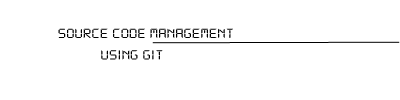
<style>
.page{position:relative;width:400px;height:100px;background:#ffffff}
.page>*{position:absolute;margin:0}
.t1{font:14.4px "DS-Digital";letter-spacing:-0.02em;color:#000000;scale:1.25 1}
</style>
<div class="page">
<p class="t1" style="left:58px;top:28px;width:175px;height:32px">SOURCE CODE MANAGEMENT<br>           USING GIT</p>
</div>
